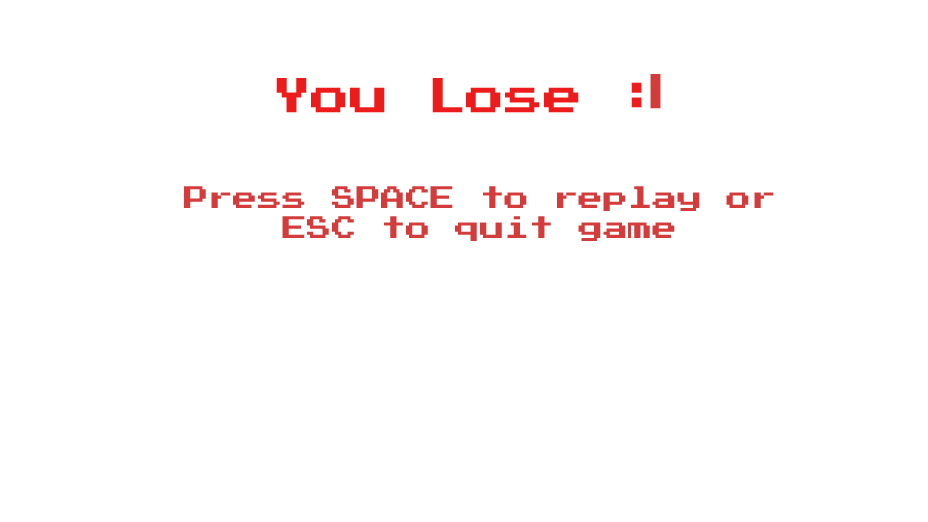
<style>
.page{position:relative;width:928px;height:522px;background:#ffffff}
.page>*{position:absolute;margin:0}
.t1{font:38.9px "PressStart2P";color:#ed1c1c}
.t2{font:38.9px "PressStart2P";color:#d43b3b}
.t3{font:24.7px "PressStart2P";color:#d43b3b}
</style>
<div class="page">
<p class="t1" style="left:276px;top:78px;width:366px;height:35px">You Lose :</p>
<p class="t2" style="left:650px;top:74px;width:11px;height:35px">|</p>
<p class="t3" style="left:184px;top:186px;width:590px;height:55px;text-align:center">Press SPACE to replay or <br>ESC to quit game</p>
</div>
